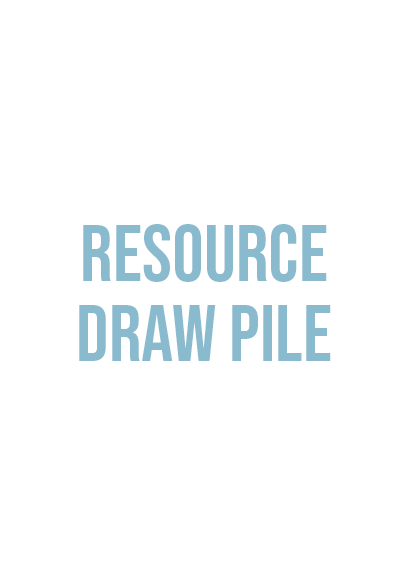
<style>
.page{position:relative;width:408px;height:585px;background:#ffffff}
.page>*{position:absolute;margin:0}
.t1{font:80px/80px "BebasNeue-Regular";color:#89bace}
</style>
<div class="page">
<p class="t1" style="left:79px;top:224px;width:252px;height:137px;text-align:center">resource<br>draw pile</p>
</div>
